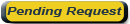
<style>
.page{position:relative;width:130px;height:24px;background:#eece20}
.page>*{position:absolute;margin:0}
.t1{font:11.2px "Arial-BoldItalicMT";color:#233645;scale:1.25 1}
</style>
<div class="page">
<p class="t1" style="left:7px;top:7px;width:115px;height:10px">Pending Request</p>
</div>
